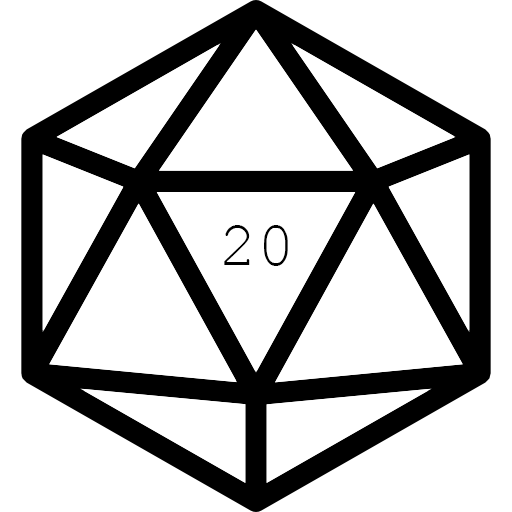
<style>
.page{position:relative;width:512px;height:512px;background:#ffffff}
.page>*{position:absolute;margin:0}
.t1{font:62.5px "CourierNewPSMT";color:#000000}
</style>
<div class="page">
<p class="t1" style="left:224px;top:225px;width:64px;height:41px">20</p>
</div>
